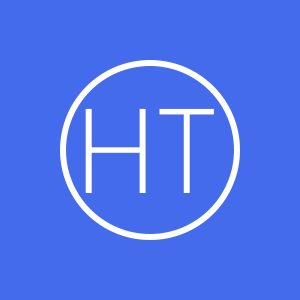
<style>
.page{position:relative;width:300px;height:300px;background:#446beb}
.page>*{position:absolute;margin:0}
.t1{font:120px "SegoeWP-Light";color:#ffffff}
</style>
<div class="page">
<p class="t1" style="left:85px;top:108px;width:129px;height:85px">HT</p>
</div>
